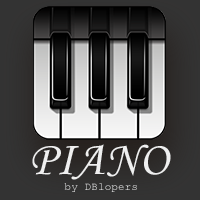
<style>
.page{position:relative;width:200px;height:200px}
.page>*{position:absolute;margin:0}
.t1{font:48px "MonotypeCorsiva";letter-spacing:0.01em;color:#efefef}
.t2{font:11px "CourierNewPSMT";letter-spacing:0.01em}
</style>
<div class="page">
<p class="t1" style="left:32px;top:144px;width:139px;height:36px">PIANO</p>
<p class="t2" style="left:64px;top:183px;width:73px;height:9px">by DBlopers</p>
</div>
